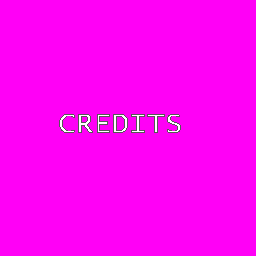
<style>
.page{position:relative;width:256px;height:256px;background:#ff00f6}
.page>*{position:absolute;margin:0}
.t1{font:30px "LucidaConsole";letter-spacing:0.02em;color:#ffffff;scale:0.95 1}
</style>
<div class="page">
<p class="t1" style="left:59px;top:114px;width:122px;height:19px">CREDITS</p>
</div>
